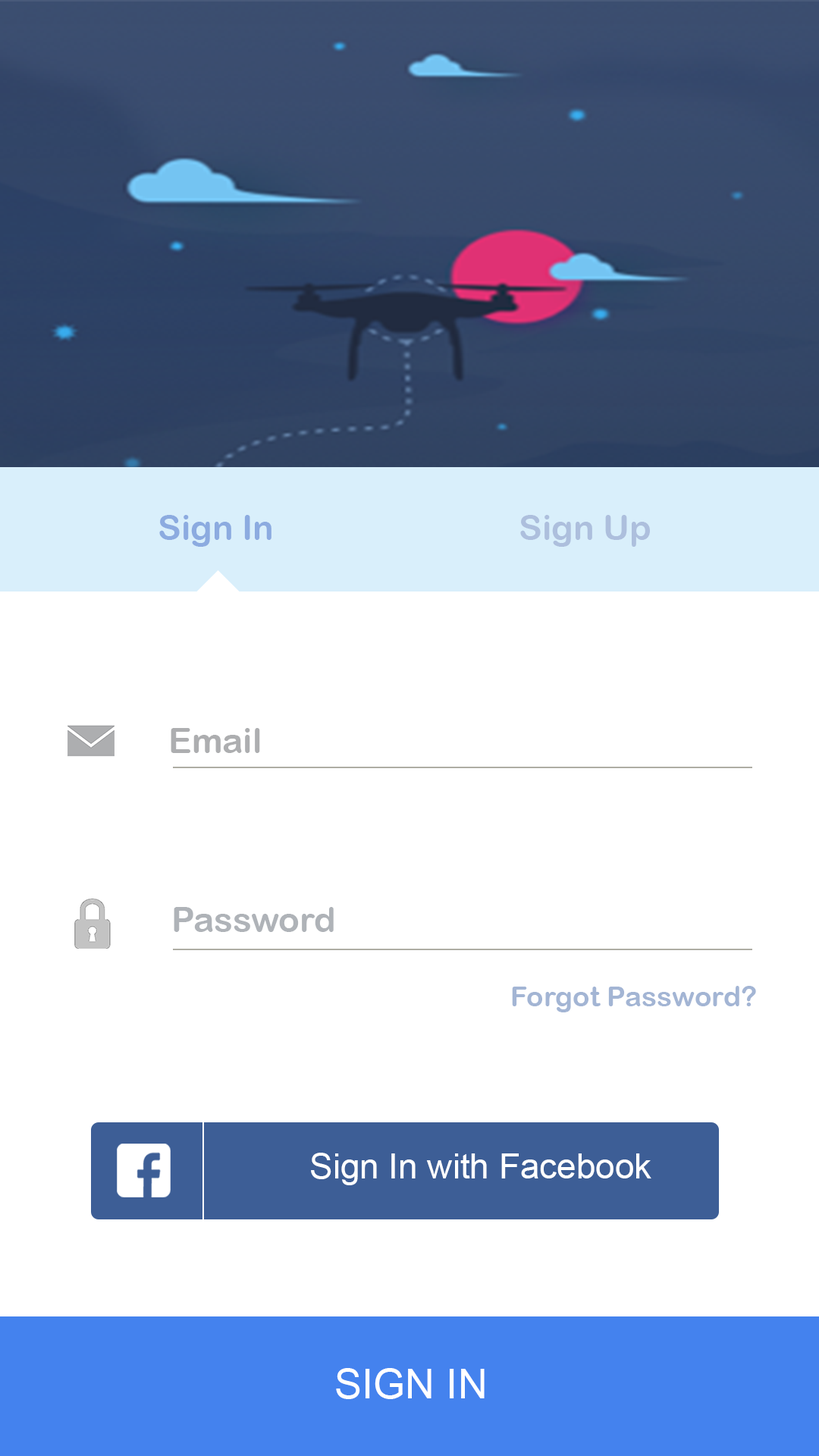
<style>
.page{position:relative;width:819px;height:1456px;background:#ffffff}
.page>*{position:absolute;margin:0}
.t1{font:34.8px "ArialRoundedMTBold";color:#8cabe0}
.t2{font:34.8px "ArialRoundedMTBold";color:#adbfdd}
.t3{font:34.8px "ArialRoundedMTBold";color:#adaeb0}
.t4{font:34.8px "ArialRoundedMTBold";color:#afb3b8}
.t5{font:28.4px "ArialRoundedMTBold";color:#a3b5d4}
.t6{font:34.8px "ArialMT";color:#ffffff}
.t7{font:41.1px "ArialMT";color:#ffffff}
</style>
<div class="page">
<p class="t1" style="left:159px;top:515px;width:112px;height:32px">Sign In</p>
<p class="t2" style="left:520px;top:515px;width:130px;height:32px">Sign Up</p>
<p class="t3" style="left:171px;top:728px;width:89px;height:25px">Email</p>
<p class="t4" style="left:174px;top:907px;width:160px;height:25px">Password</p>
<p class="t5" style="left:512px;top:986px;width:244px;height:26px">Forgot Password?</p>
<p class="t6" style="left:311px;top:1153px;width:340px;height:32px">Sign In with Facebook</p>
<p class="t7" style="left:336px;top:1368px;width:149px;height:31px">SIGN IN</p>
</div>
